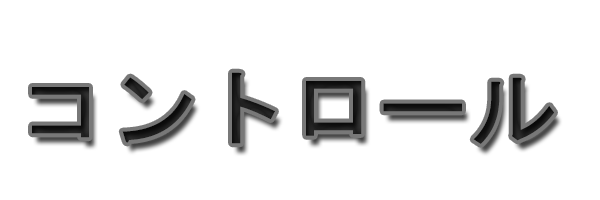
<style>
.page{position:relative;width:600px;height:200px;background:#ffffff}
.page>*{position:absolute;margin:0}
.t1{font:90px "MS-Gothic";color:#191919}
</style>
<div class="page">
<p class="t1" style="left:32px;top:72px;width:522px;height:72px">コントロール</p>
</div>
